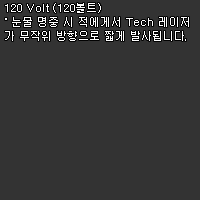
<style>
.page{position:relative;width:200px;height:200px;background:#333333}
.page>*{position:absolute;margin:0}
.t1{font:11px/14px "Dotum";color:#ffffff}
</style>
<div class="page">
<p class="t1" style="left:5px;top:3px;width:184px;height:38px">120 Volt (120볼트)<br>˚ 눈물 명중 시 적에게서 Tech 레이저<br>가 무작위 방향으로 짧게 발사됩니다.</p>
</div>
